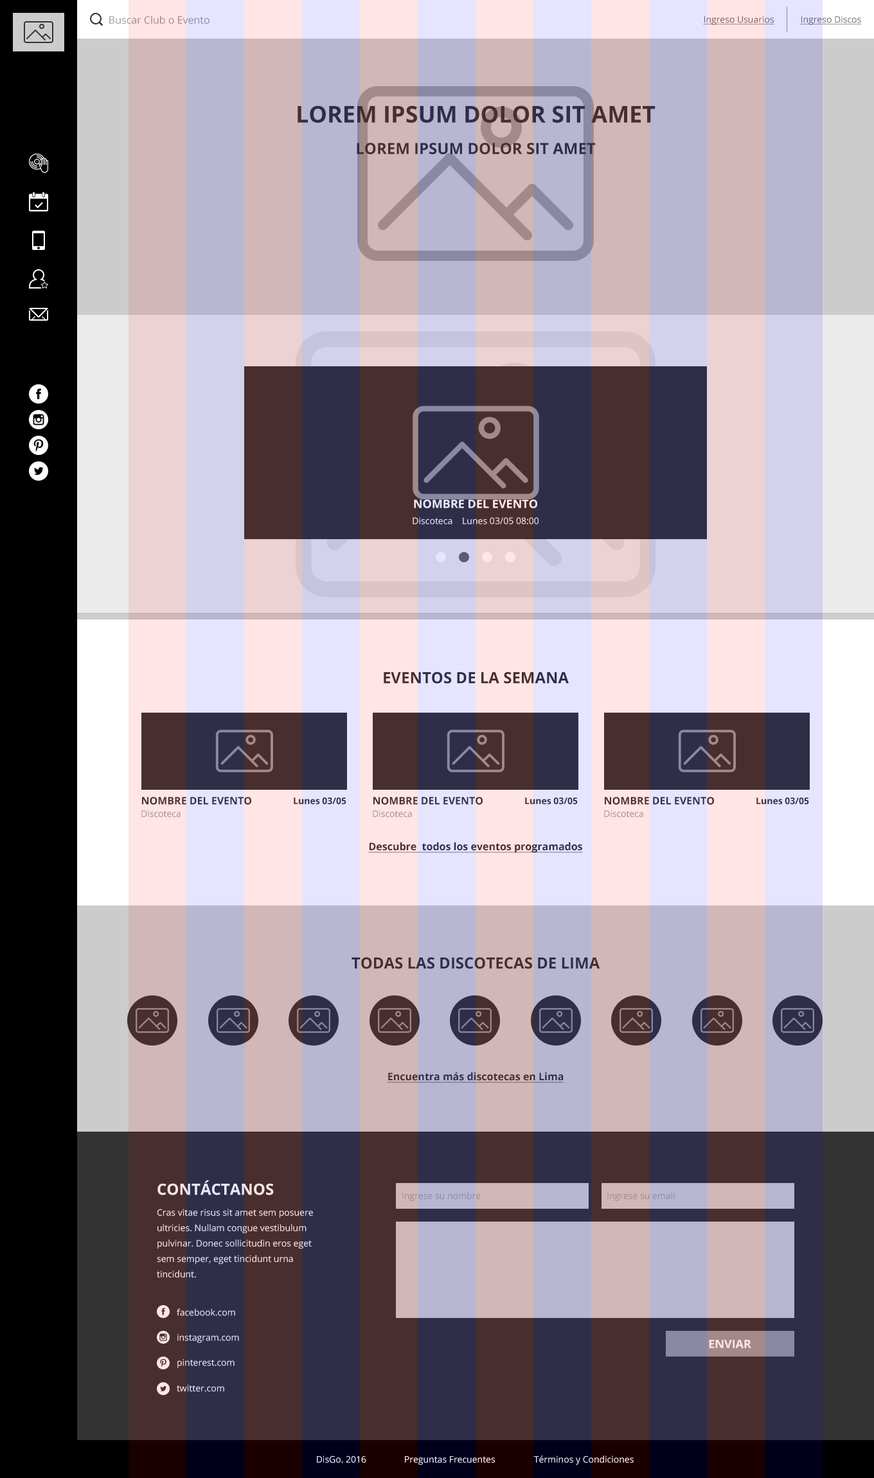
<style>
.page{position:relative;width:874px;height:1478px}
.page>*{position:absolute;margin:0}
.t1{font:10.3px "OpenSans";color:#999999}
.t2{font:9px "OpenSans";color:#666666;text-decoration:underline}
.t3{font:23.1px "OpenSans-Bold";color:#333333;text-transform:uppercase}
.t4{font:15.4px "OpenSans-Bold";color:#333333;text-transform:uppercase}
.t5{font:11.5px "OpenSans-Bold";text-transform:uppercase}
.t6{font:9px "OpenSans"}
.t7{font:10.3px "OpenSans-Bold";color:#333333;text-transform:uppercase}
.t8{font:9px "OpenSans-Bold";color:#333333}
.t9{font:9px "OpenSans";color:#999999}
.t10{font:10.3px "OpenSans-Bold";color:#333333;text-decoration:underline}
.t11{font:15.4px "OpenSans-Bold"}
.t12{font:9px/15.4px "OpenSans"}
.t13{font:9px "OpenSans";color:#e5e5ff}
.t14{font:11.6px "OpenSans-Bold";color:#ffe5e5;text-transform:uppercase}
</style>
<div class="page">
<p class="t1" style="left:109px;top:15px;width:101px;height:9px">Buscar Club o Evento</p>
<p class="t2" style="left:703px;top:16px;width:72px;height:9px">Ingreso Usuarios</p>
<p class="t2" style="left:800px;top:16px;width:62px;height:9px">Ingreso Discos</p>
<p class="t3" style="left:298px;top:105px;width:358px;height:18px">Lorem ipsum dolor sit amet</p>
<p class="t4" style="left:357px;top:143px;width:239px;height:11px">Lorem ipsum dolor sit amet</p>
<p class="t5" style="left:414px;top:499px;width:123px;height:9px">Nombre del evento</p>
<p class="t6" style="left:413px;top:517px;width:126px;height:7px">Discoteca    Lunes 03/05 08:00</p>
<p class="t4" style="left:384px;top:672px;width:185px;height:12px">Eventos de la semana</p>
<p class="t7" style="left:142px;top:797px;width:109px;height:8px">Nombre del evento</p>
<p class="t8" style="left:294px;top:798px;width:52px;height:7px">Lunes 03/05</p>
<p class="t7" style="left:373px;top:797px;width:110px;height:8px">Nombre del evento</p>
<p class="t8" style="left:525px;top:798px;width:53px;height:7px">Lunes 03/05</p>
<p class="t7" style="left:605px;top:797px;width:109px;height:8px">Nombre del evento</p>
<p class="t8" style="left:757px;top:798px;width:52px;height:7px">Lunes 03/05</p>
<p class="t9" style="left:141px;top:811px;width:40px;height:7px">Discoteca</p>
<p class="t9" style="left:373px;top:811px;width:39px;height:7px">Discoteca</p>
<p class="t9" style="left:604px;top:811px;width:39px;height:7px">Discoteca</p>
<p class="t10" style="left:368px;top:842px;width:215px;height:11px">Descubre  todos los eventos programados</p>
<p class="t4" style="left:352px;top:957px;width:248px;height:12px">todas las discotecas de lima</p>
<p class="t10" style="left:387px;top:1072px;width:177px;height:11px">Encuentra más discotecas en Lima</p>
<p class="t11" style="left:157px;top:1180px;width:117px;height:16px">CONTÁCTANOS</p>
<p class="t9" style="left:402px;top:1192px;width:79px;height:9px">Ingrese su nombre</p>
<p class="t9" style="left:607px;top:1192px;width:68px;height:9px">Ingrese su email</p>
<p class="t12" style="left:157px;top:1209px;width:156px;height:69px">Cras vitae risus sit amet sem posuere ultricies. Nullam congue vestibulum pulvinar. Donec sollicitudin eros eget sem semper, eget tincidunt urna tincidunt.</p>
<p class="t13" style="left:177px;top:1309px;width:58px;height:7px">facebook.com</p>
<p class="t13" style="left:177px;top:1334px;width:62px;height:9px">instagram.com</p>
<p class="t14" style="left:709px;top:1340px;width:42px;height:8px">Enviar</p>
<p class="t13" style="left:177px;top:1359px;width:58px;height:9px">pinterest.com</p>
<p class="t13" style="left:177px;top:1385px;width:47px;height:7px">twitter.com</p>
<p class="t13" style="left:317px;top:1456px;width:49px;height:8px">DisGo. 2016</p>
<p class="t6" style="left:405px;top:1456px;width:90px;height:9px">Preguntas Frecuentes</p>
<p class="t13" style="left:533px;top:1456px;width:101px;height:9px">Términos y Condiciones</p>
</div>
